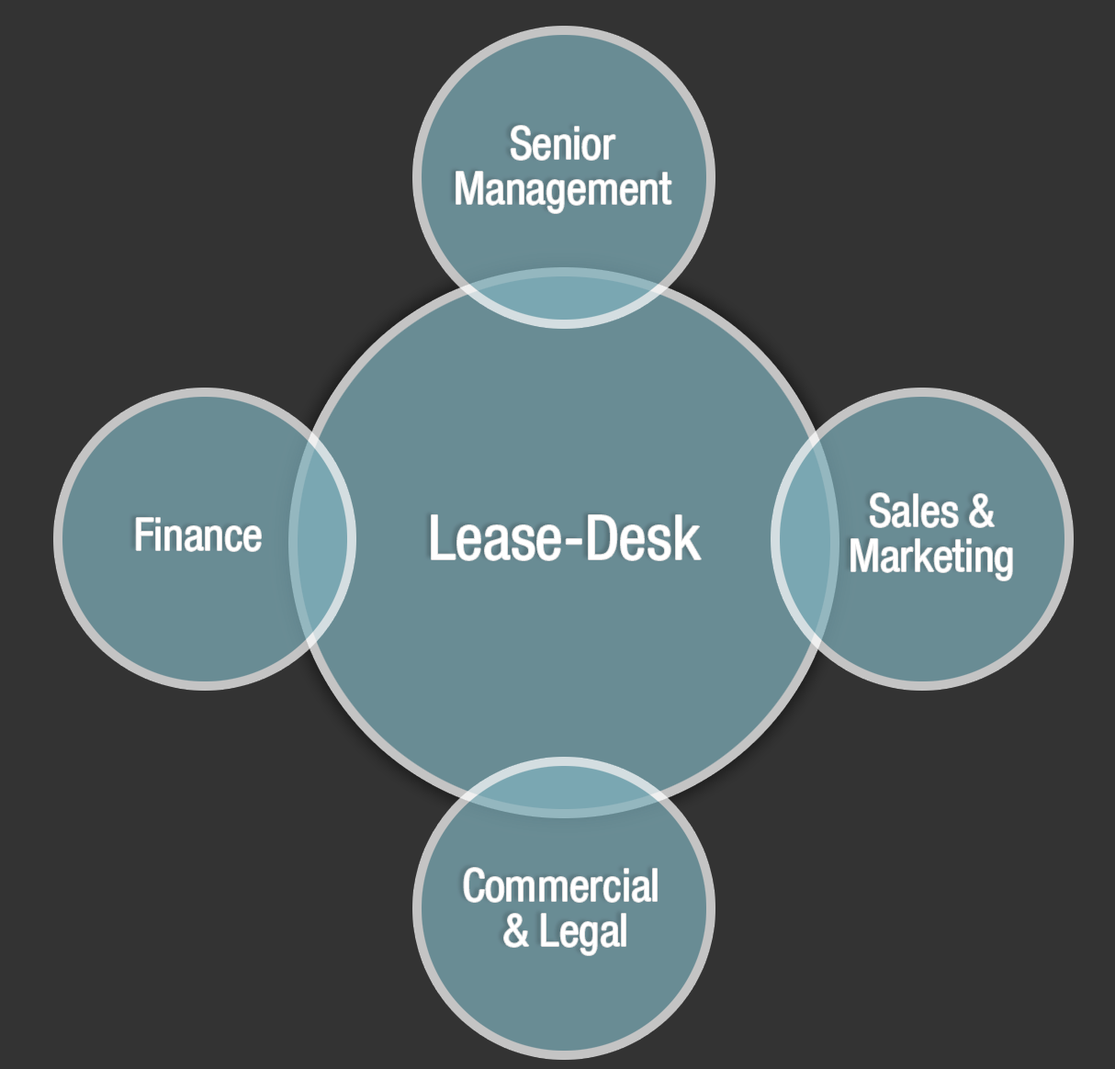
<style>
.page{position:relative;width:1115px;height:1069px;background:#333333}
.page>*{position:absolute;margin:0}
.t1{font:44.8px/44.8px "HelveticaNeueLTPro-Cn";color:#ffffff}
.t2{font:44.8px "HelveticaNeueLTPro-Cn";color:#ffffff}
.t3{font:62px "HelveticaNeueLTPro-Cn";color:#ffffff}
</style>
<div class="page">
<p class="t1" style="left:457px;top:126px;width:215px;height:87px;text-align:center">Senior<br>Management</p>
<p class="t1" style="left:852px;top:493px;width:160px;height:88px;text-align:center">Sales &amp;<br>Marketing</p>
<p class="t2" style="left:136px;top:518px;width:125px;height:33px">Finance</p>
<p class="t3" style="left:432px;top:515px;width:269px;height:45px">Lease-Desk</p>
<p class="t1" style="left:464px;top:868px;width:193px;height:87px;text-align:center">Commercial <br>&amp; Legal</p>
</div>
